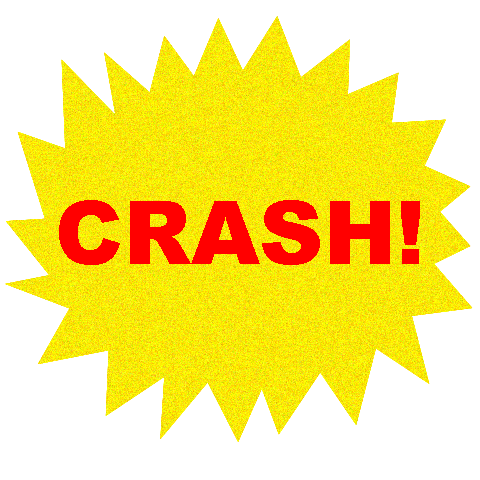
<style>
.page{position:relative;width:480px;height:480px;background:#ffffff}
.page>*{position:absolute;margin:0}
.t1{font:87.5px "Arial-Black";color:#ff0000}
</style>
<div class="page">
<p class="t1" style="left:59px;top:200px;width:361px;height:65px">CRASH!</p>
</div>
